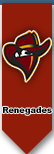
<style>
.page{position:relative;width:54px;height:154px;background:#901c09}
.page>*{position:absolute;margin:0}
.t1{font:8.3px "Arial-Black";letter-spacing:-0.01em;color:#000000}
</style>
<div class="page">
<p class="t1" style="left:2px;top:106px;width:50px;height:9px">Renegades</p>
</div>
